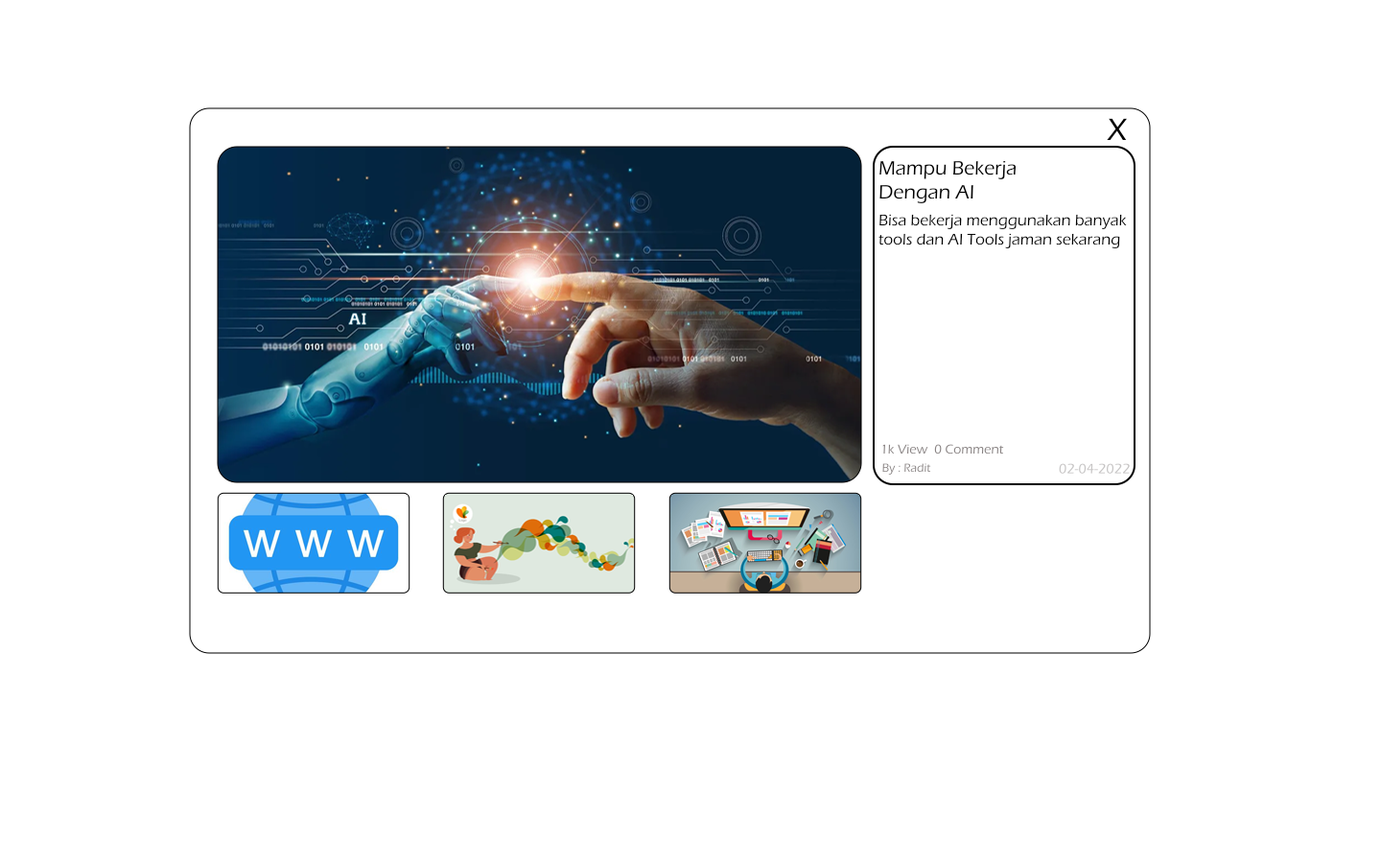
<style>
.page{position:relative;width:1381px;height:863px;background:#ffffff}
.page>*{position:absolute;margin:0}
.t1{font:32px "ErasITC-Medium";color:#000000}
.t2{font:20px "ErasITC-Medium";color:#000000}
.t3{font:16px "ErasITC-Medium";color:#000000}
.t4{font:13.3px "ErasITC-Medium";color:#888282}
.t5{font:12px "ErasITC-Medium";color:#888282}
.t6{font:14.1px "ErasITC-Medium";color:#c6c4c4}
</style>
<div class="page">
<p class="t1" style="left:1107px;top:118px;width:21px;height:22px">X</p>
<p class="t2" style="left:880px;top:161px;width:137px;height:42px">Mampu Bekerja <br>Dengan AI</p>
<p class="t3" style="left:879px;top:214px;width:248px;height:34px">Bisa bekerja menggunakan banyak<br>tools dan AI Tools jaman sekarang</p>
<p class="t4" style="left:882px;top:444px;width:123px;height:12px">1k View  0 Comment</p>
<p class="t5" style="left:882px;top:463px;width:50px;height:13px">By : Radit</p>
<p class="t6" style="left:1058px;top:463px;width:73px;height:12px">02-04-2022</p>
</div>
